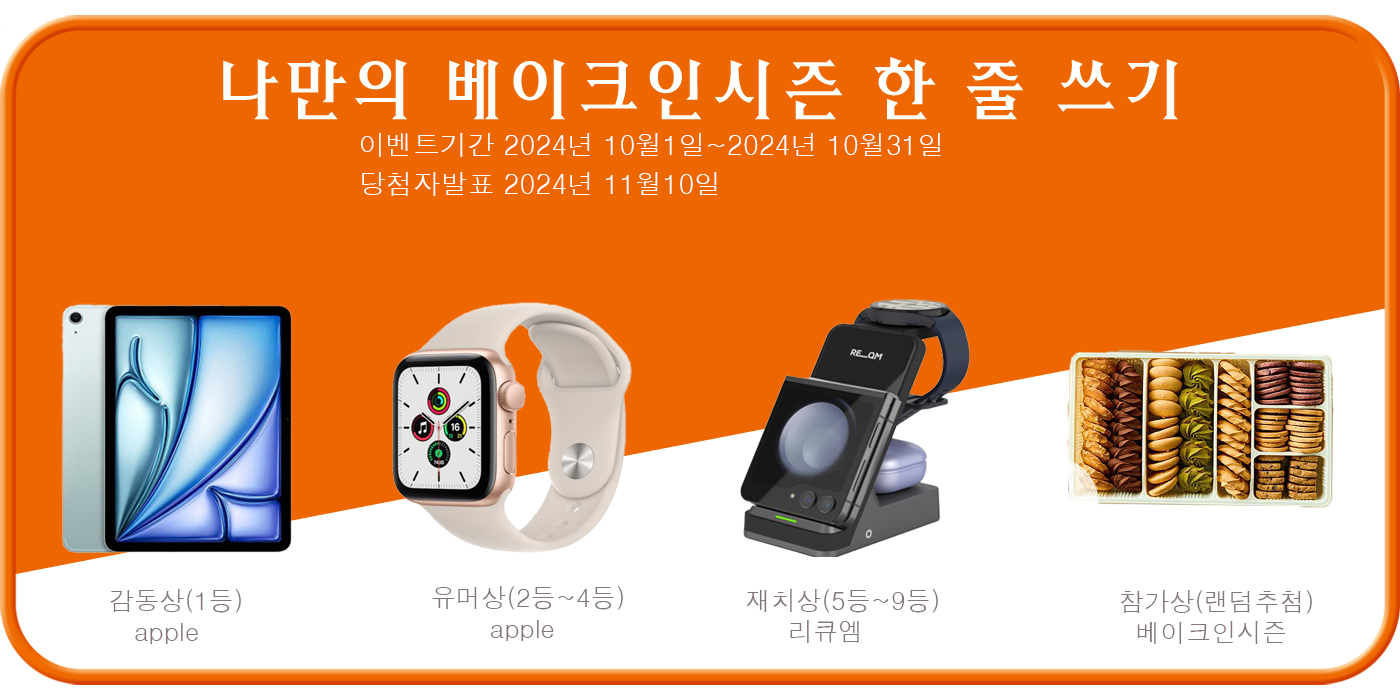
<style>
.page{position:relative;width:1400px;height:700px;background:#ed6600}
.page>*{position:absolute;margin:0}
.t1{font:68.1px "HYcysM";color:#ffffff}
.t2{font:27.2px "Dotum";color:#ffffff}
.t3{font:25.3px "Dotum";color:#837777}
</style>
<div class="page">
<p class="t1" style="left:223px;top:57px;width:955px;height:63px">나만의 베이크인시즌 한 줄 쓰기</p>
<p class="t2" style="left:361px;top:133px;width:580px;height:24px">이벤트기간 2024년 10월1일~2024년 10월31일</p>
<p class="t2" style="left:362px;top:172px;width:355px;height:24px">당첨자발표 2024년 11월10일</p>
<p class="t3" style="left:110px;top:589px;width:131px;height:55px">감동상(1등)<br>   apple</p>
<p class="t3" style="left:432px;top:586px;width:191px;height:55px">유머상(2등~4등)<br>       apple</p>
<p class="t3" style="left:746px;top:589px;width:192px;height:54px">재치상(5등~9등)<br>     리큐엠</p>
<p class="t3" style="left:1120px;top:590px;width:192px;height:54px">참가상(랜덤추첨)<br>  베이크인시즌</p>
</div>
